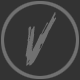
<style>
.page{position:relative;width:80px;height:80px;background:#333333}
.page>*{position:absolute;margin:0}
.t1{font:68.6px "AnotherAmerica";letter-spacing:0.06em;color:#717171}
</style>
<div class="page">
<p class="t1" style="left:25px;top:12px;width:31px;height:54px">V</p>
</div>
